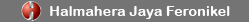
<style>
.page{position:relative;width:249px;height:22px;background:#747474}
.page>*{position:absolute;margin:0}
.t1{font:14.5px "ArialRoundedMTBold";color:#ffffff}
</style>
<div class="page">
<p class="t1" style="left:50px;top:6px;width:180px;height:13px">Halmahera Jaya Feronikel</p>
</div>
